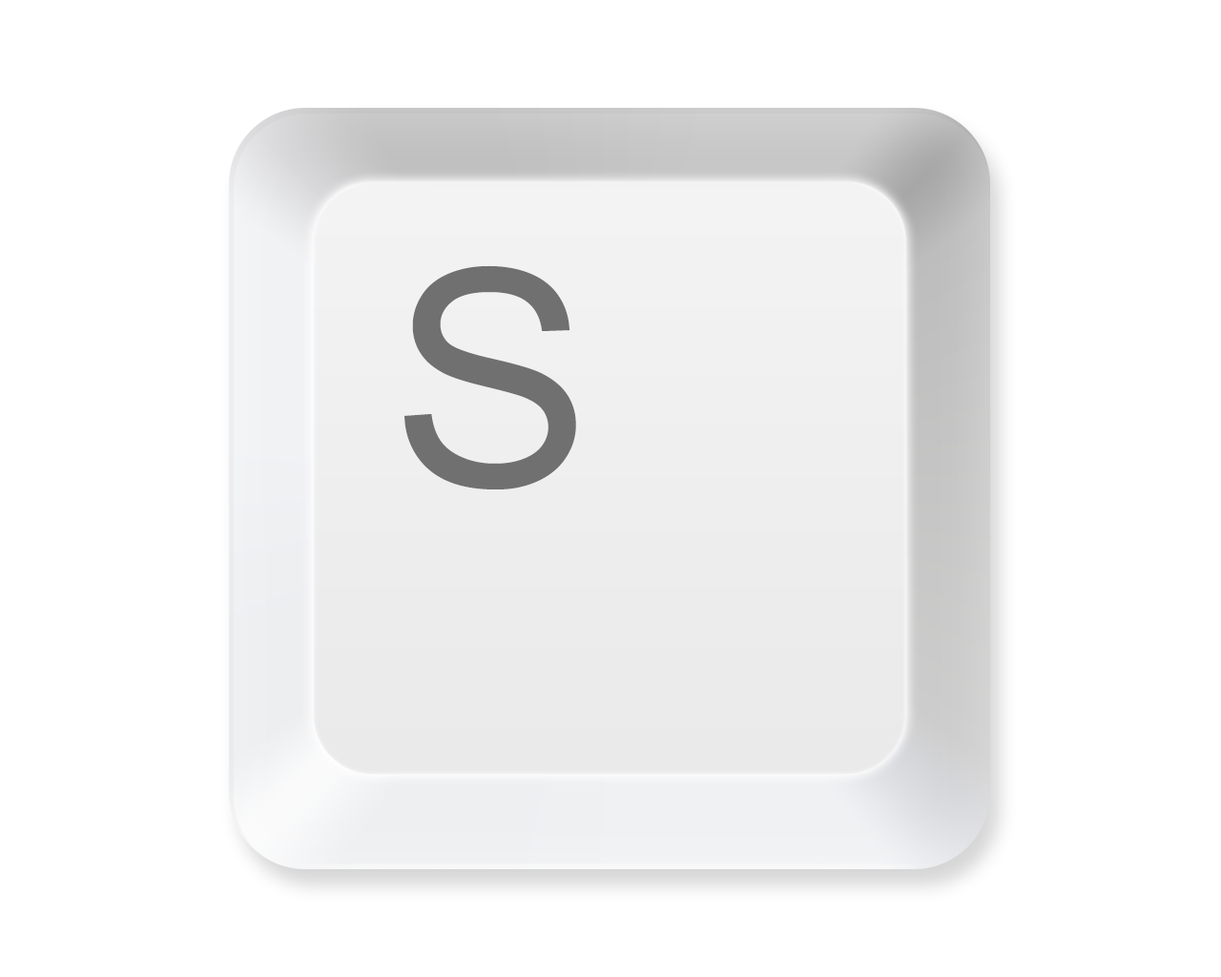
<style>
.page{position:relative;width:1221px;height:977px;background:#ffffff}
.page>*{position:absolute;margin:0}
.t1{font:300.5px "ArialMT";color:#707070}
</style>
<div class="page">
<p class="t1" style="left:404px;top:265px;width:172px;height:224px">S</p>
</div>
